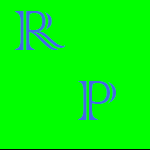
<style>
.page{position:relative;width:150px;height:150px;background:#00ff00}
.page>*{position:absolute;margin:0}
.t1{font:75px "ColonnaMT";color:#4567e4}
</style>
<div class="page">
<p class="t1" style="left:15px;top:11px;width:50px;height:39px">R</p>
<p class="t1" style="left:78px;top:81px;width:38px;height:39px">P</p>
</div>
